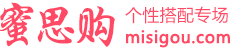
<style>
.page{position:relative;width:250px;height:50px;background:#ffffff}
.page>*{position:absolute;margin:0}
.t1{font:50px "STXingkai";letter-spacing:0.02em;color:#ff4965}
.t2{font:17px "MicrosoftYaHeiUI";letter-spacing:0.02em;color:#ff4965}
.t3{font:16px "MicrosoftYaHeiUI";letter-spacing:0.02em;color:#ff4965;font-weight:bold}
</style>
<div class="page">
<p class="t1" style="left:0px;top:2px;width:115px;height:45px">蜜思购</p>
<p class="t2" style="left:125px;top:6px;width:103px;height:18px">个性搭配专场</p>
<p class="t3" style="left:126px;top:30px;width:104px;height:18px">misigou.com</p>
</div>
